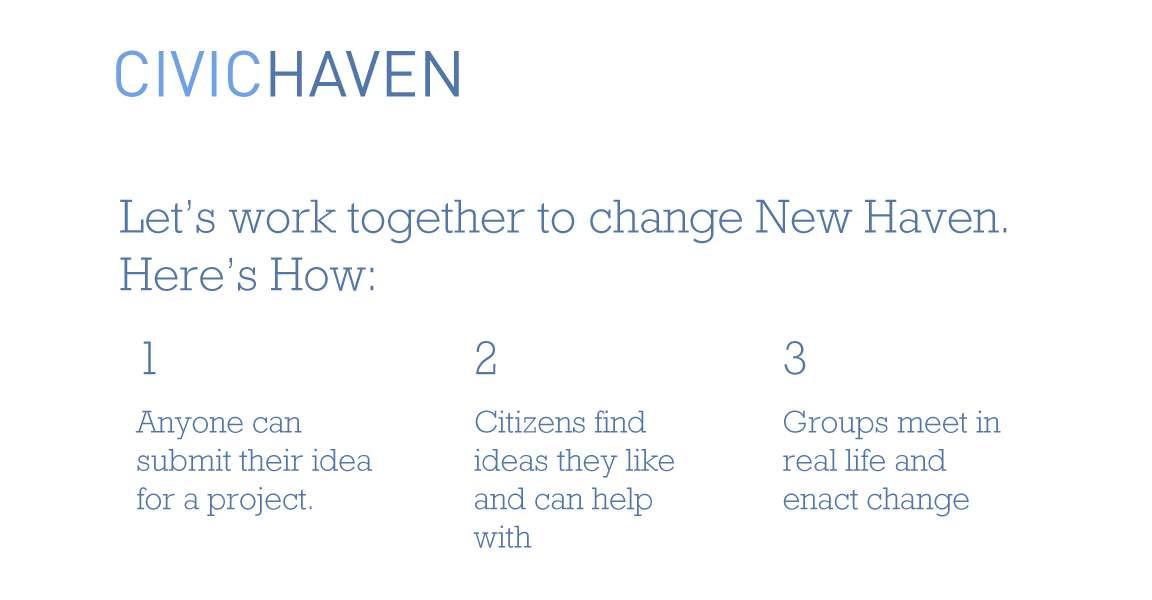
<style>
.page{position:relative;width:1152px;height:600px;background:#ffffff}
.page>*{position:absolute;margin:0}
.t1{font:64px "DIN-Regular";color:#6ea1e7}
.t2{font:64px "DIN-Regular";color:#5177aa}
.t3{font:48px "MRockwell-Light";color:#5177aa}
.t4{font:32px "MRockwell-Light";color:#5177aa}
</style>
<div class="page">
<p class="t1" style="left:116px;top:50px;width:343px;height:47px">CIVIC<span class="t2">HAVEN</span></p>
<p class="t3" style="left:120px;top:199px;width:887px;height:92px">Let’s work together to change New Haven. Here’s How:</p>
<p class="t3" style="left:143px;top:341px;width:13px;height:34px">1</p>
<p class="t3" style="left:476px;top:341px;width:20px;height:34px">2</p>
<p class="t3" style="left:784px;top:341px;width:22px;height:34px">3</p>
<p class="t4" style="left:135px;top:410px;width:237px;height:106px">Anyone can submit their idea for a project.</p>
<p class="t4" style="left:473px;top:410px;width:201px;height:138px">Citizens find ideas they like and can help with</p>
<p class="t4" style="left:783px;top:410px;width:218px;height:107px">Groups meet in real life and enact change</p>
</div>
